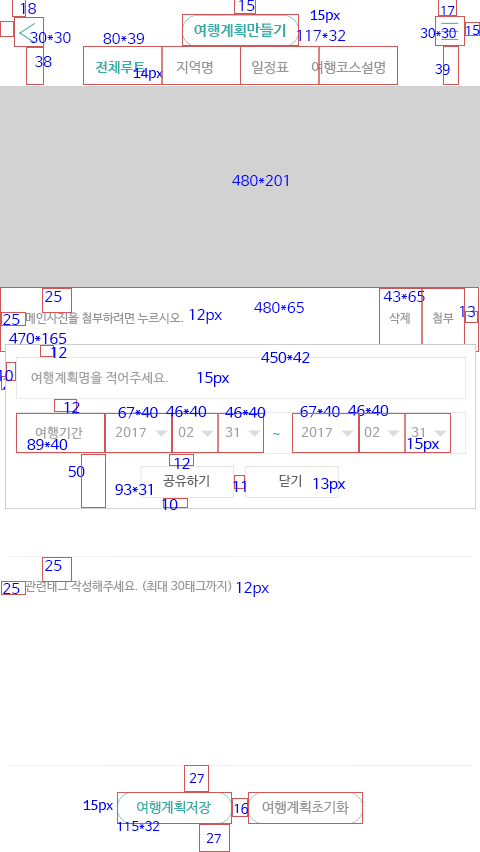
<style>
.page{position:relative;width:480px;height:852px;background:#ffffff}
.page>*{position:absolute;margin:0}
.t1{font:15px "NanumBarunGothic";color:#0000ff}
.t2{font:13px "NanumBarunGothic";color:#0000ff}
.t3{font:13px "MoebiusKorea-Regular";color:#0000ff}
.t4{font:15px "NanumBarunGothicBold";color:#36ada4}
.t5{font:14px "NanumBarunGothicBold";color:#36ada4}
.t6{font:14px "NanumBarunGothic";color:#959595}
.t7{font:12px "NanumBarunGothic";color:#959595}
.t8{font:14.6px "NanumBarunGothic";color:#0000ff}
.t9{font:13px "NanumBarunGothic";letter-spacing:0.025em;color:#a0a0a0}
.t10{font:14px "NanumBarunGothic";letter-spacing:0.025em;color:#36ada4}
.t11{font:12.9px "NanumBarunGothic";letter-spacing:0.025em;color:#626262}
.t12{font:14.1px "NanumBarunGothic";color:#36ada4}
.t13{font:14.1px "NanumBarunGothic";color:#959595}
</style>
<div class="page">
<p class="t1" style="left:20px;top:3px;width:16px;height:11px">18</p>
<p class="t1" style="left:239px;top:0px;width:16px;height:11px">15</p>
<p class="t2" style="left:441px;top:6px;width:14px;height:9px">17</p>
<p class="t3" style="left:310px;top:10px;width:30px;height:13px">15px</p>
<p class="t4" style="left:194px;top:23px;width:92px;height:15px">여행계획만들기</p>
<p class="t1" style="left:297px;top:30px;width:49px;height:12px">117*32</p>
<p class="t2" style="left:420px;top:28px;width:36px;height:10px">30*30</p>
<p class="t2" style="left:466px;top:25px;width:14px;height:10px">15</p>
<p class="t1" style="left:30px;top:32px;width:41px;height:11px">30*30</p>
<p class="t1" style="left:103px;top:33px;width:42px;height:11px">80*39</p>
<p class="t1" style="left:35px;top:56px;width:17px;height:11px">38</p>
<p class="t5" style="left:95px;top:61px;width:51px;height:13px">전체루트</p>
<p class="t6" style="left:176px;top:61px;width:37px;height:13px">지역명</p>
<p class="t6" style="left:252px;top:61px;width:37px;height:13px">일정표</p>
<p class="t6" style="left:311px;top:61px;width:74px;height:13px">여행코스설명</p>
<p class="t2" style="left:435px;top:64px;width:15px;height:11px">39</p>
<p class="t3" style="left:133px;top:68px;width:30px;height:13px">14px</p>
<p class="t1" style="left:232px;top:175px;width:56px;height:11px">480*201</p>
<p class="t1" style="left:45px;top:291px;width:17px;height:11px">25</p>
<p class="t1" style="left:383px;top:291px;width:42px;height:11px">43*65</p>
<p class="t1" style="left:254px;top:302px;width:50px;height:11px">480*65</p>
<p class="t1" style="left:3px;top:314px;width:17px;height:11px">25</p>
<p class="t7" style="left:25px;top:312px;width:158px;height:12px">메인사진을 첨부하려면 누르시오.</p>
<p class="t1" style="left:189px;top:309px;width:33px;height:15px">12px</p>
<p class="t7" style="left:389px;top:312px;width:21px;height:12px">삭제</p>
<p class="t7" style="left:432px;top:312px;width:22px;height:12px">첨부</p>
<p class="t1" style="left:460px;top:306px;width:15px;height:11px">13</p>
<p class="t8" style="left:9px;top:333px;width:58px;height:12px">470*165</p>
<p class="t8" style="left:51px;top:347px;width:16px;height:11px">12</p>
<p class="t8" style="left:261px;top:352px;width:49px;height:11px">450*42</p>
<p class="t8" style="left:0px;top:370px;width:13px;height:11px">10</p>
<p class="t9" style="left:31px;top:371px;width:137px;height:14px">여행계획명을 적어주세요.</p>
<p class="t8" style="left:197px;top:372px;width:33px;height:15px">15px</p>
<p class="t8" style="left:64px;top:402px;width:16px;height:11px">12</p>
<p class="t8" style="left:118px;top:407px;width:40px;height:12px">67*40</p>
<p class="t8" style="left:166px;top:406px;width:41px;height:11px">46*40</p>
<p class="t8" style="left:225px;top:407px;width:41px;height:11px">46*40</p>
<p class="t8" style="left:300px;top:406px;width:40px;height:12px">67*40</p>
<p class="t8" style="left:348px;top:405px;width:41px;height:11px">46*40</p>
<p class="t9" style="left:35px;top:426px;width:48px;height:14px">여행기간</p>
<p class="t9" style="left:115px;top:427px;width:31px;height:10px">2017</p>
<p class="t9" style="left:178px;top:427px;width:16px;height:10px">02</p>
<p class="t9" style="left:225px;top:427px;width:13px;height:10px">31</p>
<p class="t10" style="left:273px;top:433px;width:7px;height:2px">~</p>
<p class="t9" style="left:301px;top:427px;width:31px;height:10px">2017</p>
<p class="t9" style="left:364px;top:427px;width:16px;height:10px">02</p>
<p class="t8" style="left:407px;top:438px;width:33px;height:15px">15px</p>
<p class="t9" style="left:411px;top:427px;width:13px;height:10px">31</p>
<p class="t8" style="left:27px;top:439px;width:41px;height:11px">89*40</p>
<p class="t8" style="left:175px;top:458px;width:15px;height:11px">12</p>
<p class="t8" style="left:68px;top:466px;width:17px;height:11px">50</p>
<p class="t8" style="left:115px;top:484px;width:37px;height:11px">93*31</p>
<p class="t11" style="left:163px;top:475px;width:46px;height:12px">공유하기</p>
<p class="t8" style="left:233px;top:481px;width:13px;height:11px">11</p>
<p class="t11" style="left:279px;top:475px;width:22px;height:12px">닫기</p>
<p class="t8" style="left:313px;top:478px;width:33px;height:15px">13px</p>
<p class="t8" style="left:162px;top:499px;width:16px;height:11px">10</p>
<p class="t1" style="left:45px;top:560px;width:17px;height:11px">25</p>
<p class="t7" style="left:25px;top:580px;width:207px;height:12px">관련태그 작성해주세요. (최대 30태그까지)</p>
<p class="t1" style="left:236px;top:582px;width:33px;height:15px">12px</p>
<p class="t1" style="left:3px;top:583px;width:17px;height:11px">25</p>
<p class="t2" style="left:189px;top:773px;width:15px;height:10px">27</p>
<p class="t3" style="left:83px;top:800px;width:30px;height:13px">15px</p>
<p class="t12" style="left:137px;top:801px;width:74px;height:13px">여행계획저장</p>
<p class="t2" style="left:234px;top:803px;width:14px;height:11px">16</p>
<p class="t13" style="left:262px;top:801px;width:87px;height:14px">여행계획초기화</p>
<p class="t2" style="left:117px;top:821px;width:43px;height:10px">115*32</p>
<p class="t2" style="left:206px;top:833px;width:15px;height:10px">27</p>
</div>
